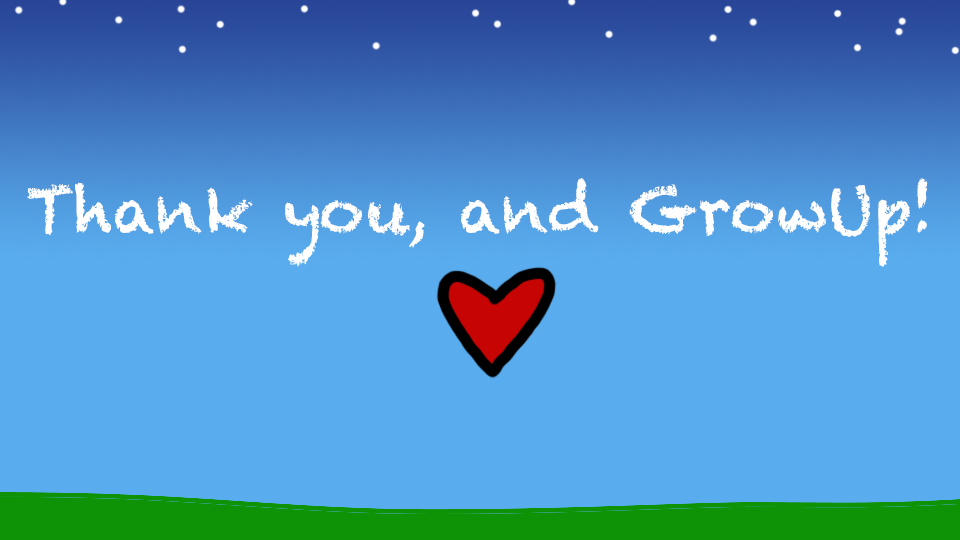
<style>
.page{position:relative;width:960px;height:540px;background:#59adee}
.page>*{position:absolute;margin:0}
.t1{font:62.8px "Chalkduster";color:#ffffff}
</style>
<div class="page">
<p class="t1" style="left:27px;top:178px;width:901px;height:89px">Thank you, and GrowUp!</p>
</div>
